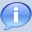
<style>
.page{position:relative;width:32px;height:32px;background:#c7d6e9}
.page>*{position:absolute;margin:0}
.t1{font:21.3px "STHupo";color:#ffffff}
</style>
<div class="page">
<p class="t1" style="left:14px;top:7px;width:4px;height:15px">i</p>
</div>
